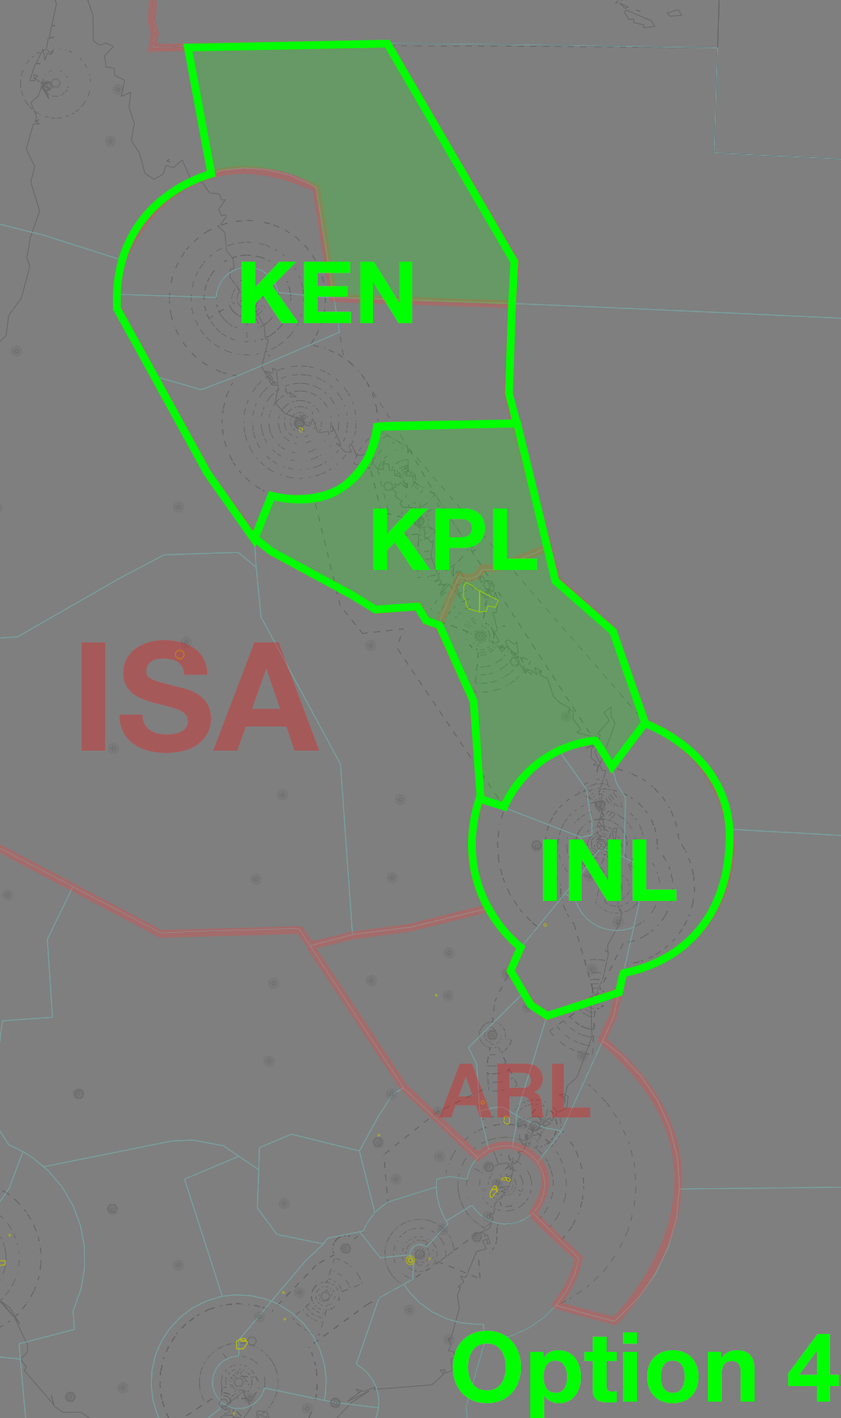
<style>
.page{position:relative;width:841px;height:1418px;background:#7f7f7f}
.page>*{position:absolute;margin:0}
.t1{font:86.2px "HelveticaNeueLTStd-Bd";color:#00ff00}
.t2{font:151.6px "HelveticaNeueLTStd-Bd";color:#a65959}
.t3{font:75.8px "HelveticaNeueLTStd-Bd";color:#a65959}
.t4{font:96.6px "HelveticaNeueLTStd-Bd";color:#00ff00}
</style>
<div class="page">
<p class="t1" style="left:241px;top:262px;width:172px;height:61px">KEN</p>
<p class="t1" style="left:373px;top:508px;width:164px;height:62px">KPL</p>
<p class="t2" style="left:81px;top:640px;width:238px;height:113px">ISA</p>
<p class="t1" style="left:543px;top:839px;width:134px;height:62px">INL</p>
<p class="t3" style="left:439px;top:1064px;width:151px;height:53px">ARL</p>
<p class="t4" style="left:452px;top:1331px;width:387px;height:89px">Option 4</p>
</div>
